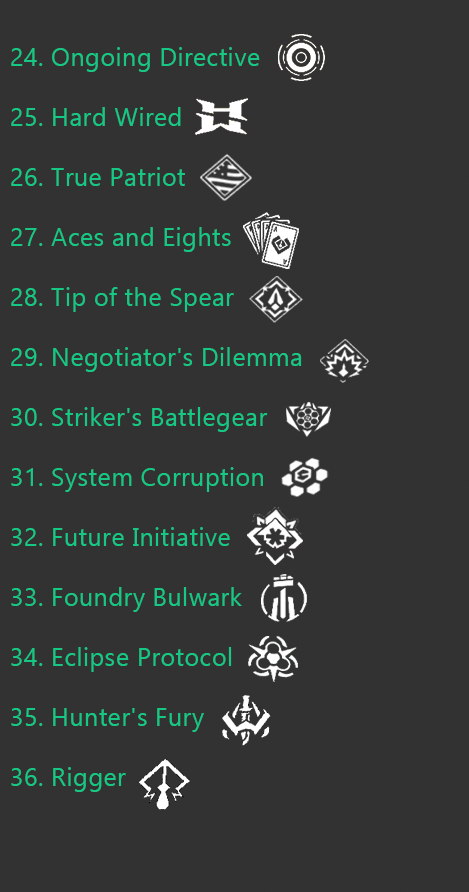
<style>
.page{position:relative;width:469px;height:892px;background:#323232}
.page>*{position:absolute;margin:0}
.t1{font:25px "Ebrima";letter-spacing:0.02em;color:#17c884}
</style>
<div class="page">
<p class="t1" style="left:11px;top:47px;width:291px;height:745px">24. Ongoing Directive<br><br>25. Hard Wired<br><br>26. True Patriot<br><br>27. Aces and Eights<br><br>28. Tip of the Spear<br><br>29. Negotiator's Dilemma<br><br>30. Striker's Battlegear<br><br>31. System Corruption<br><br>32. Future Initiative<br><br>33. Foundry Bulwark<br><br>34. Eclipse Protocol<br><br>35. Hunter's Fury<br><br>36. Rigger</p>
</div>
